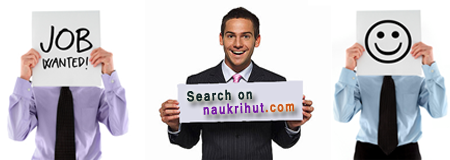
<style>
.page{position:relative;width:450px;height:160px;background:#fdfdfd}
.page>*{position:absolute;margin:0}
.t1{font:15.7px/13.8px "Vrinda-Bold";letter-spacing:0.1em;color:#142727;scale:0.82 1}
.t2{font:15.7px/13.8px "Vrinda-Bold";letter-spacing:0.1em;color:#7318a3;scale:0.82 1}
.t3{font:15.7px/13.8px "Vrinda-Bold";letter-spacing:0.1em;color:#cc5819;scale:0.82 1}
</style>
<div class="page">
<p class="t1" style="left:187px;top:89px;width:108px;height:26px;rotate:-2deg">Search on<br>   <span class="t2">naukrihut</span><span class="t3">.com</span></p>
</div>
